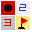
<style>
.page{position:relative;width:32px;height:32px;background:#ffffff}
.page>*{position:absolute;margin:0}
.t1{font:10.1px "AdventureSubtitles";letter-spacing:-0.05em;color:#2644c8;scale:1.21 1}
.t2{font:10.1px "AdventureSubtitles";letter-spacing:-0.05em;color:#db0000;scale:1.21 1}
</style>
<div class="page">
<p class="t1" style="left:19px;top:4px;width:7px;height:7px">2</p>
<p class="t2" style="left:4px;top:19px;width:7px;height:7px">3</p>
</div>
